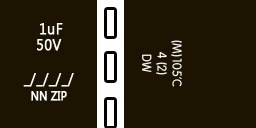
<style>
.page{position:relative;width:256px;height:128px;background:#1c1401}
.page>*{position:absolute;margin:0}
.t1{font:15.7px/16.7px "SegoeUI";letter-spacing:0.02em;color:#ffffff;font-weight:bold;scale:0.89 1}
.t2{font:11.8px/16.7px "SegoeUI";letter-spacing:0.02em;color:#ffffff;font-weight:bold;scale:0.89 1}
.t3{font:12.5px "Vagabond";color:#ffffff}
</style>
<div class="page">
<p class="t1" style="left:23px;top:23px;width:51px;height:78px;text-align:center">1uF<br>50V<br><br>_/_/_/_/<br><span class="t2">NN ZIP</span></p>
<p class="t3" style="left:142px;top:40px;width:40px;height:47px;text-align:center;rotate:90deg">(M)105’C<br>4 (2)<br>DW</p>
</div>
